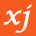
<style>
.page{position:relative;width:36px;height:36px;background:#f55b1f}
.page>*{position:absolute;margin:0}
.t1{font:25px "LucidaCalligraphy-Italic";color:#ffffff;font-weight:bold}
</style>
<div class="page">
<p class="t1" style="left:3px;top:4px;width:29px;height:29px">xj</p>
</div>
